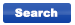
<style>
.page{position:relative;width:75px;height:25px;background:#ffffff}
.page>*{position:absolute;margin:0}
.t1{font:11.2px "Arial-Black";color:#ffffff}
</style>
<div class="page">
<p class="t1" style="left:15px;top:8px;width:43px;height:9px">Search</p>
</div>
